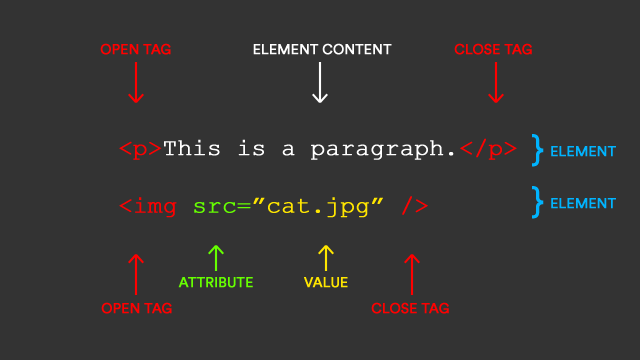
<style>
.page{position:relative;width:640px;height:360px;background:#333333}
.page>*{position:absolute;margin:0}
.t1{font:14px "CircularStd-Book";letter-spacing:-0.01em;color:#ff0000;text-transform:uppercase;font-weight:bold}
.t2{font:14px "CircularStd-Book";letter-spacing:-0.01em;color:#ffffff;text-transform:uppercase;font-weight:bold}
.t3{font:36px "CircularStd-Book";letter-spacing:-0.01em;color:#00b4ff;text-transform:uppercase;font-weight:bold}
.t4{font:24px "CourierNewPSMT";letter-spacing:-0.01em;color:#ffffff;font-weight:bold}
.t5{font:24px "CourierNewPSMT";letter-spacing:-0.01em;color:#ff0000;font-weight:bold}
.t6{font:24px "CourierNewPSMT";letter-spacing:-0.01em;color:#66ff00;font-weight:bold}
.t7{font:24px "CourierNewPSMT";letter-spacing:-0.01em;color:#ffe600;font-weight:bold}
.t8{font:14px "CircularStd-Book";letter-spacing:-0.01em;color:#00b4ff;text-transform:uppercase;font-weight:bold}
.t9{font:14px "CircularStd-Book";letter-spacing:-0.01em;color:#66ff00;text-transform:uppercase;font-weight:bold}
.t10{font:14px "CircularStd-Book";letter-spacing:-0.01em;color:#ffe600;text-transform:uppercase;font-weight:bold}
</style>
<div class="page">
<p class="t1" style="left:100px;top:43px;width:71px;height:12px">Open Tag</p>
<p class="t2" style="left:253px;top:43px;width:139px;height:12px">Element Content</p>
<p class="t1" style="left:454px;top:43px;width:78px;height:12px">close Tag</p>
<p class="t3" style="left:532px;top:134px;width:12px;height:33px">}</p>
<p class="t4" style="left:119px;top:138px;width:398px;height:80px"><span class="t5">&lt;p&gt;</span>This is a paragraph.<span class="t5">&lt;/p&gt;<br><br>&lt;img </span><span class="t6">src=</span><span class="t7">”cat.jpg” </span><span class="t5">/&gt;</span></p>
<p class="t8" style="left:551px;top:146px;width:65px;height:11px">Element</p>
<p class="t3" style="left:532px;top:186px;width:12px;height:33px">}</p>
<p class="t8" style="left:551px;top:198px;width:65px;height:11px">Element</p>
<p class="t9" style="left:178px;top:277px;width:75px;height:11px">Attribute</p>
<p class="t10" style="left:304px;top:277px;width:44px;height:11px">Value</p>
<p class="t1" style="left:101px;top:302px;width:71px;height:12px">Open Tag</p>
<p class="t1" style="left:371px;top:302px;width:78px;height:12px">close Tag</p>
</div>
